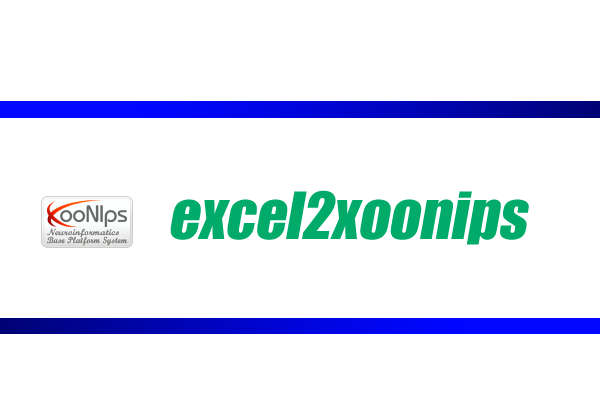
<style>
.page{position:relative;width:600px;height:400px;background:#ffffff}
.page>*{position:absolute;margin:0}
.t1{font:60px "Impact";color:#00aa68;font-style:italic}
</style>
<div class="page">
<p class="t1" style="left:170px;top:190px;width:359px;height:55px">excel2xoonips</p>
</div>
